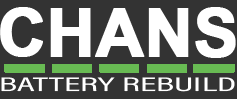
<style>
.page{position:relative;width:237px;height:99px;background:#333333}
.page>*{position:absolute;margin:0}
.t1{font:66.1px "Arial-BoldMT";letter-spacing:-0.01em;color:#ffffff;font-weight:bold}
.t2{font:19.8px "AcuminConcept-Condensed";color:#ffffff;font-weight:bold;scale:1.98 1}
</style>
<div class="page">
<p class="t1" style="left:0px;top:7px;width:236px;height:51px">CHANS</p>
<p class="t2" style="left:1px;top:77px;width:234px;height:15px">BATTERY REBUILD</p>
</div>
